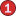
<style>
.page{position:relative;width:16px;height:16px;background:#d22c2c}
.page>*{position:absolute;margin:0}
.t1{font:12.1px "MonaspaceNeonVarExtraLight-SemiBold";letter-spacing:-0.01em;color:#f1dff3;scale:1.08 1}
</style>
<div class="page">
<p class="t1" style="left:5px;top:3px;width:7px;height:10px">1</p>
</div>
